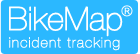
<style>
.page{position:relative;width:140px;height:54px;background:#2bb8ff}
.page>*{position:absolute;margin:0}
.t1{font:32px "HelveticaNeue-UltraLight";letter-spacing:-0.01em;color:#ffffff;font-weight:bold}
.t2{font:14px "HelveticaNeue-UltraLight";color:#f3fbff;font-weight:bold}
.t3{font:14px "HelveticaNeue-UltraLight";letter-spacing:0.06em;color:#ffffff;font-weight:bold}
</style>
<div class="page">
<p class="t1" style="left:9px;top:6px;width:114px;height:31px">BikeMap</p>
<p class="t2" style="left:121px;top:5px;width:12px;height:12px">®</p>
<p class="t3" style="left:9px;top:37px;width:111px;height:14px">incident tracking</p>
</div>
